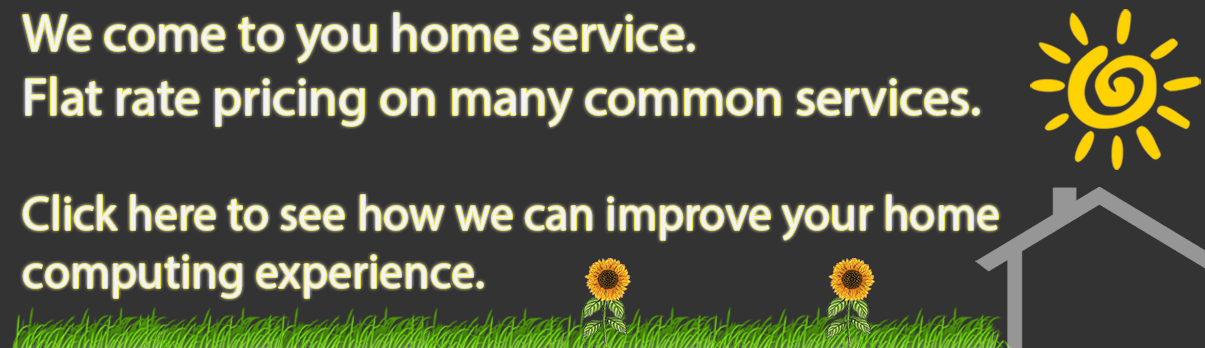
<style>
.page{position:relative;width:1205px;height:348px;background:#333333}
.page>*{position:absolute;margin:0}
.t1{font:53.1px "MyriadPro-Regular";color:#f3f3f3}
.t2{font:48px "MyriadPro-Regular";color:#f3f3f3}
</style>
<div class="page">
<p class="t1" style="left:23px;top:13px;width:975px;height:285px">We come to you home service.  <br>Flat rate pricing on many common services.<br><span class="t2"><br>Click here to see how we can improve your home computing experience.</span></p>
</div>
